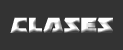
<style>
.page{position:relative;width:123px;height:50px;background:#333333}
.page>*{position:absolute;margin:0}
.t1{font:24px "EagleStrike"}
</style>
<div class="page">
<p class="t1" style="left:10px;top:17px;width:103px;height:16px">Clases</p>
</div>
